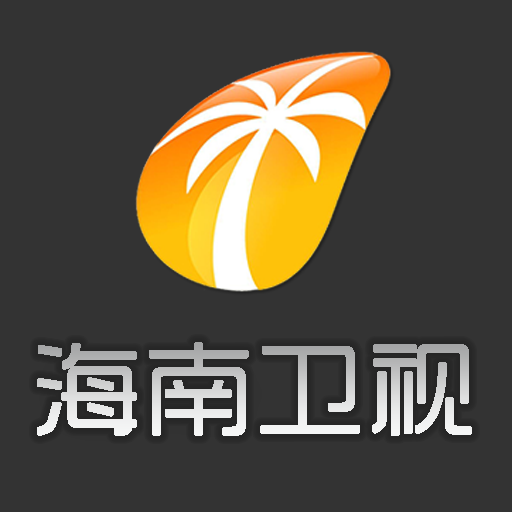
<style>
.page{position:relative;width:512px;height:512px;background:#333333}
.page>*{position:absolute;margin:0}
.t1{font:106.7px "SJshishang-Regular";letter-spacing:0.02em;font-weight:bold}
</style>
<div class="page">
<p class="t1" style="left:37px;top:342px;width:435px;height:94px">海南卫视</p>
</div>
